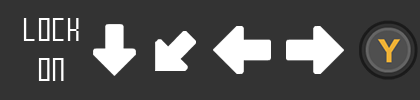
<style>
.page{position:relative;width:420px;height:100px;background:#333333}
.page>*{position:absolute;margin:0}
.t1{font:33.3px "Mecha";color:#ffffff}
</style>
<div class="page">
<p class="t1" style="left:23px;top:18px;width:56px;height:63px;text-align:center">LOCK<br>ON</p>
</div>
